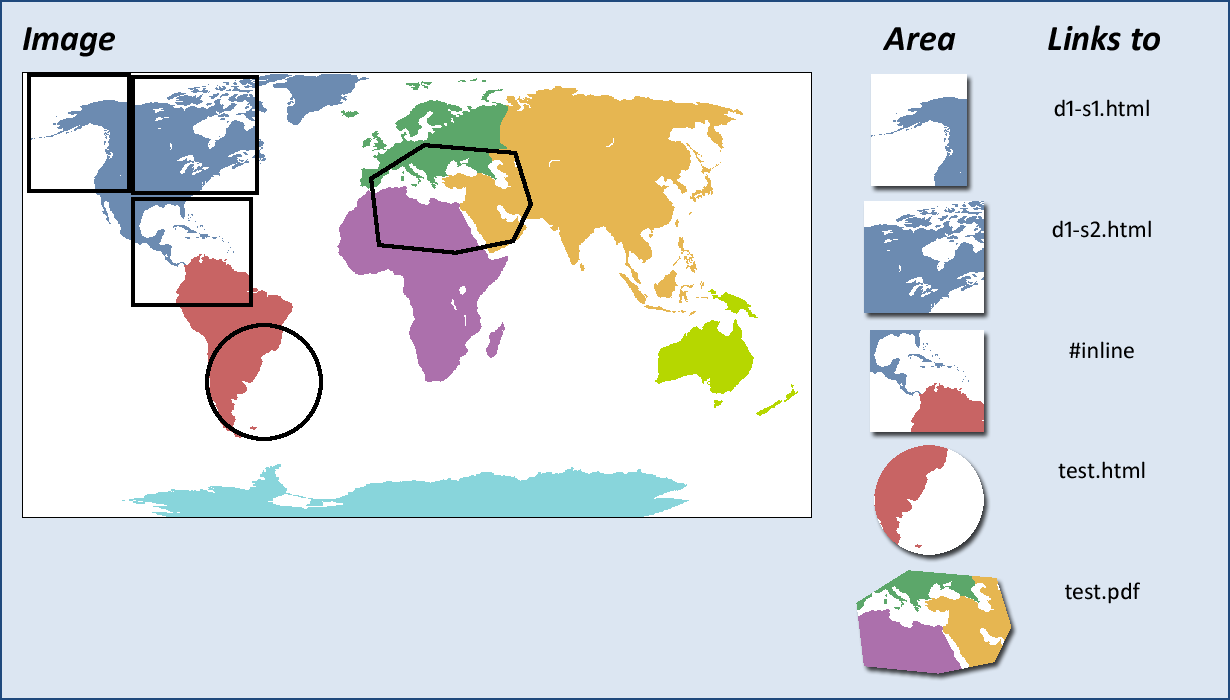
<style>
.page{position:relative;width:1230px;height:700px;background:#dce6f2}
.page>*{position:absolute;margin:0}
.t1{font:36px "Calibri-BoldItalic";color:#000000}
.t2{font:24px "Calibri";color:#000000}
</style>
<div class="page">
<p class="t1" style="left:23px;top:27px;width:92px;height:30px">Image</p>
<p class="t1" style="left:883px;top:27px;width:73px;height:24px">Area</p>
<p class="t1" style="left:1048px;top:25px;width:112px;height:26px">Links to</p>
<p class="t2" style="left:1052px;top:99px;width:99px;height:505px;text-align:center">d1-s1.html<br>d1-s2.html<br>#inline<br>test.html<br>test.pdf</p>
</div>
